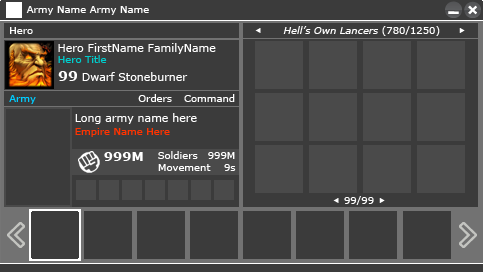
<style>
.page{position:relative;width:483px;height:272px;background:#3b3b3b}
.page>*{position:absolute;margin:0}
.t1{font:10px "Verdana";color:#ffffff}
.t2{font:10px "Verdana-Italic";color:#ffffff}
.t3{font:11px "Verdana";color:#ffffff}
.t4{font:10px "Verdana";color:#00cccc}
.t5{font:14px "Verdana-Bold";color:#ffffff}
.t6{font:10px "Verdana";color:#00ccff}
.t7{font:10px "Verdana";color:#ff3300}
.t8{font:13px "Verdana-Bold";color:#ffffff}
</style>
<div class="page">
<p class="t1" style="left:26px;top:6px;width:123px;height:9px">Army Name Army Name</p>
<p class="t1" style="left:10px;top:27px;width:23px;height:7px">Hero</p>
<p class="t2" style="left:283px;top:26px;width:157px;height:10px">Hell’s Own Lancers <span class="t1">(780/1250)</span></p>
<p class="t3" style="left:58px;top:43px;width:158px;height:11px">Hero FirstName FamilyName</p>
<p class="t4" style="left:58px;top:55px;width:49px;height:8px">Hero Title</p>
<p class="t3" style="left:58px;top:71px;width:130px;height:10px"><span class="t5">99</span> Dwarf Stoneburner</p>
<p class="t6" style="left:9px;top:95px;width:27px;height:9px">Army</p>
<p class="t1" style="left:138px;top:94px;width:34px;height:8px">Orders</p>
<p class="t1" style="left:184px;top:94px;width:51px;height:8px">Command</p>
<p class="t3" style="left:75px;top:113px;width:122px;height:11px">Long army name here</p>
<p class="t7" style="left:75px;top:128px;width:95px;height:9px">Empire Name Here</p>
<p class="t8" style="left:104px;top:152px;width:39px;height:9px">999M</p>
<p class="t1" style="left:158px;top:151px;width:40px;height:8px">Soldiers</p>
<p class="t1" style="left:208px;top:152px;width:27px;height:7px">999M</p>
<p class="t1" style="left:158px;top:164px;width:53px;height:7px">Movement</p>
<p class="t1" style="left:224px;top:164px;width:12px;height:7px">9s</p>
<p class="t1" style="left:344px;top:196px;width:30px;height:9px">99/99</p>
</div>
